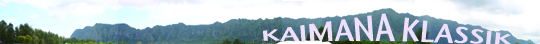
<style>
.page{position:relative;width:540px;height:44px}
.page>*{position:absolute;margin:0}
.t1{font:27.6px "StoneSansSemSCITCTTSemi";color:#efdffc;scale:1.04 1}
.t2{font:24px "StoneSansSemSCITCTTSemi";color:#efdffc;scale:1.2 1}
</style>
<div class="page">
<p class="t1" style="left:263px;top:13px;width:132px;height:28px;rotate:-4deg">KAIMANA</p>
<p class="t2" style="left:402px;top:17px;width:110px;height:28px;rotate:6deg">KLASSIK</p>
</div>
